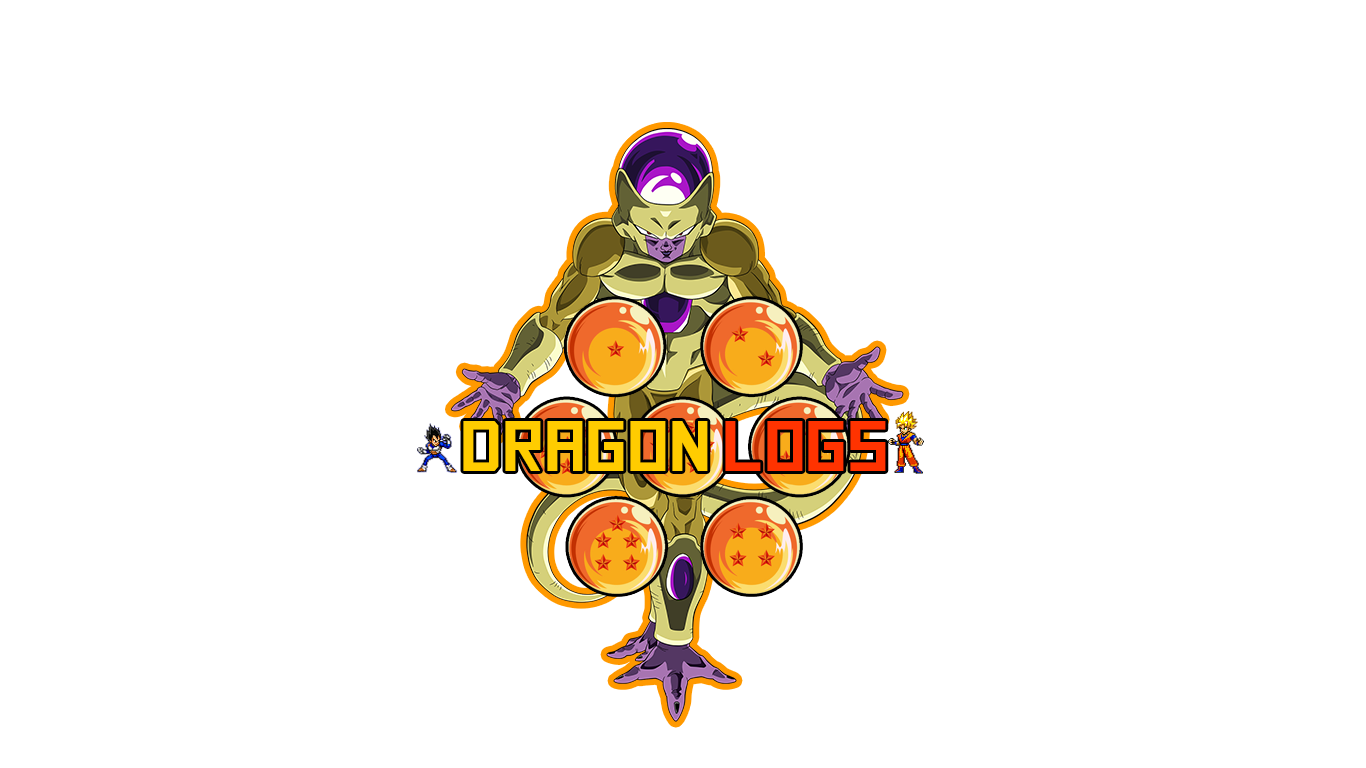
<style>
.page{position:relative;width:1366px;height:768px;background:#ffffff}
.page>*{position:absolute;margin:0}
.t1{font:71.3px "SquareFont";color:#ffcc00}
.t2{font:71.3px "SquareFont";color:#ff3300}
</style>
<div class="page">
<p class="t1" style="left:463px;top:421px;width:245px;height:50px">Dragon</p>
<p class="t2" style="left:725px;top:421px;width:161px;height:50px">LOGS</p>
</div>
